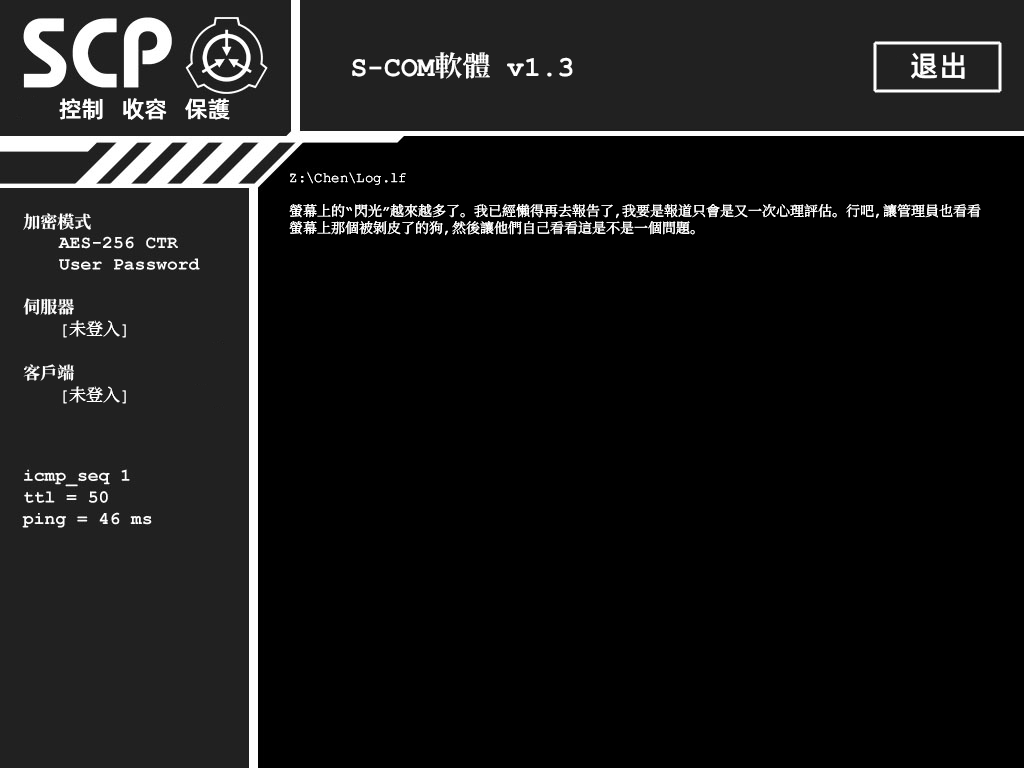
<style>
.page{position:relative;width:1024px;height:768px;background:#000000}
.page>*{position:absolute;margin:0}
.t1{font:28px "ContainmentBreach-Bold";color:#ffffff}
.t2{font:29px "AlibabaPuHuiTiM";color:#ffffff}
.t3{font:23px "AlibabaPuHuiTiM";color:#ffffff}
.t4{font:14px/17px "ContainmentBreach-Regular";color:#ffffff}
.t5{font:17px/18px "ContainmentBreach-Regular";color:#ffffff}
.t6{font:17px/17px "ContainmentBreach-Bold";color:#ffffff}
.t7{font:17px/22px "ContainmentBreach-Bold";color:#ffffff}
.t8{font:17px/22px "ContainmentBreach-Regular";color:#ffffff}
</style>
<div class="page">
<p class="t1" style="left:352px;top:52px;width:221px;height:27px">S-COM軟體 v1.3</p>
<p class="t2" style="left:911px;top:52px;width:54px;height:27px">退出</p>
<p class="t3" style="left:59px;top:98px;width:171px;height:22px">控制   收容   保護</p>
<p class="t4" style="left:289px;top:172px;width:692px;height:64px">Z:\Chen\Log.lf<br><br>螢幕上的“閃光”越來越多了。我已經懶得再去報告了，我要是報道只會是又一次心理評估。行吧，讓管理員也看看<br>螢幕上那個被剝皮了的狗，然後讓他們自己看看這是不是一個問題。</p>
<p class="t5" style="left:23px;top:213px;width:103px;height:191px"><span class="t6">加密模式<br><br><br><br><br></span><span class="t7">伺服器<br> </span>[未登入]<br><br><span class="t7">客戶端<br> </span><span class="t8">[未登入]</span></p>
</div>
